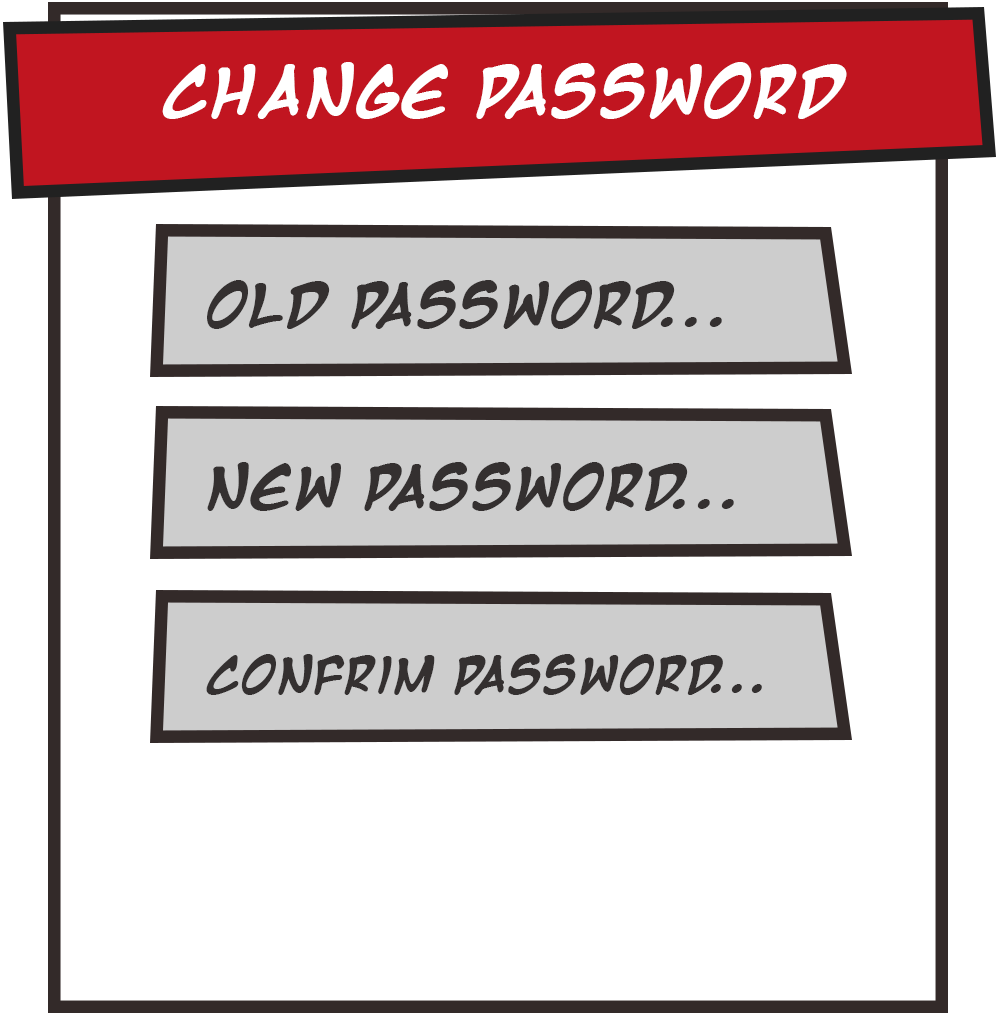
<style>
.page{position:relative;width:1000px;height:1015px;background:#ffffff}
.page>*{position:absolute;margin:0}
.t1{font:57.3px "MangaTempleBold";color:#ffffff}
.t2{font:50px "MangaTempleBold";color:#343030}
.t3{font:41.7px "MangaTempleBold";color:#343030}
</style>
<div class="page">
<p class="t1" style="left:162px;top:62px;width:685px;height:57px">Change Password</p>
<p class="t2" style="left:207px;top:280px;width:515px;height:49px">Old Password...</p>
<p class="t2" style="left:207px;top:462px;width:527px;height:49px">New Password...</p>
<p class="t3" style="left:206px;top:654px;width:556px;height:41px">Confrim Password...</p>
</div>
